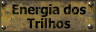
<style>
.page{position:relative;width:96px;height:32px}
.page>*{position:absolute;margin:0}
.t1{font:13.3px/14px "Tahoma-Bold";color:#000000;scale:0.95 1}
</style>
<div class="page">
<p class="t1" style="left:12px;top:4px;width:74px;height:25px;text-align:center">Energia dos<br>Trilhos</p>
</div>
